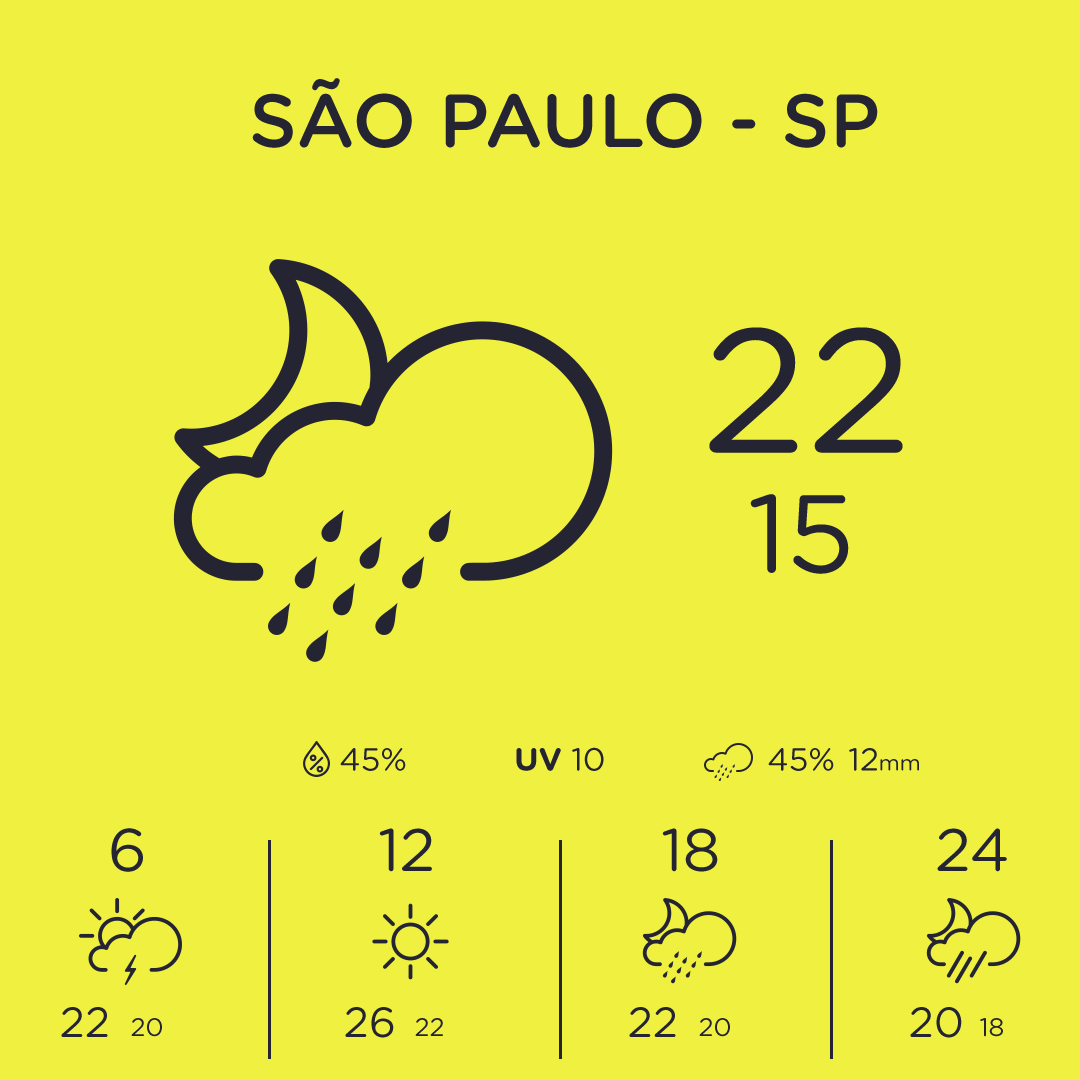
<style>
.page{position:relative;width:1080px;height:1080px;background:#f0f041}
.page>*{position:absolute;margin:0}
.t1{font:75.2px "GothamRounded-Medium";color:#36363b;text-transform:uppercase}
.t2{font:175.9px "GothamRounded-Book";color:#36363b;text-transform:uppercase}
.t3{font:110.2px "GothamRounded-Book";color:#36363b;text-transform:uppercase}
.t4{font:31.9px "GothamRounded-Book";color:#242433;text-transform:uppercase}
.t5{font:31.9px "GothamRounded-Bold";color:#242433;text-transform:uppercase}
.t6{font:22px "GothamRounded-Book";color:#242433}
.t7{font:60px "GothamRounded-Book";color:#242433;text-transform:uppercase}
.t8{font:42.3px "GothamRounded-Book";color:#242433;text-transform:uppercase}
.t9{font:25.2px "GothamRounded-Book";color:#242433;text-transform:uppercase}
</style>
<div class="page">
<p class="t1" style="left:252px;top:78px;width:626px;height:70px">SÃO PAULO - SP</p>
<p class="t2" style="left:709px;top:327px;width:194px;height:126px">22</p>
<p class="t3" style="left:750px;top:494px;width:99px;height:80px">15</p>
<p class="t4" style="left:340px;top:748px;width:66px;height:23px">45%</p>
<p class="t5" style="left:516px;top:748px;width:45px;height:23px">UV</p>
<p class="t4" style="left:572px;top:747px;width:32px;height:24px">10</p>
<p class="t4" style="left:768px;top:748px;width:66px;height:23px">45%</p>
<p class="t4" style="left:849px;top:748px;width:70px;height:23px">12<span class="t6">mm</span></p>
<p class="t7" style="left:111px;top:828px;width:32px;height:44px">6</p>
<p class="t7" style="left:379px;top:828px;width:53px;height:44px">12</p>
<p class="t7" style="left:662px;top:828px;width:56px;height:44px">18</p>
<p class="t7" style="left:937px;top:828px;width:70px;height:44px">24</p>
<p class="t8" style="left:61px;top:1007px;width:47px;height:30px">22</p>
<p class="t8" style="left:345px;top:1007px;width:49px;height:31px">26</p>
<p class="t8" style="left:629px;top:1007px;width:47px;height:30px">22</p>
<p class="t8" style="left:910px;top:1007px;width:52px;height:31px">20</p>
<p class="t9" style="left:131px;top:1018px;width:31px;height:19px">20</p>
<p class="t9" style="left:415px;top:1018px;width:28px;height:18px">22</p>
<p class="t9" style="left:699px;top:1018px;width:31px;height:19px">20</p>
<p class="t9" style="left:980px;top:1018px;width:23px;height:19px">18</p>
</div>
